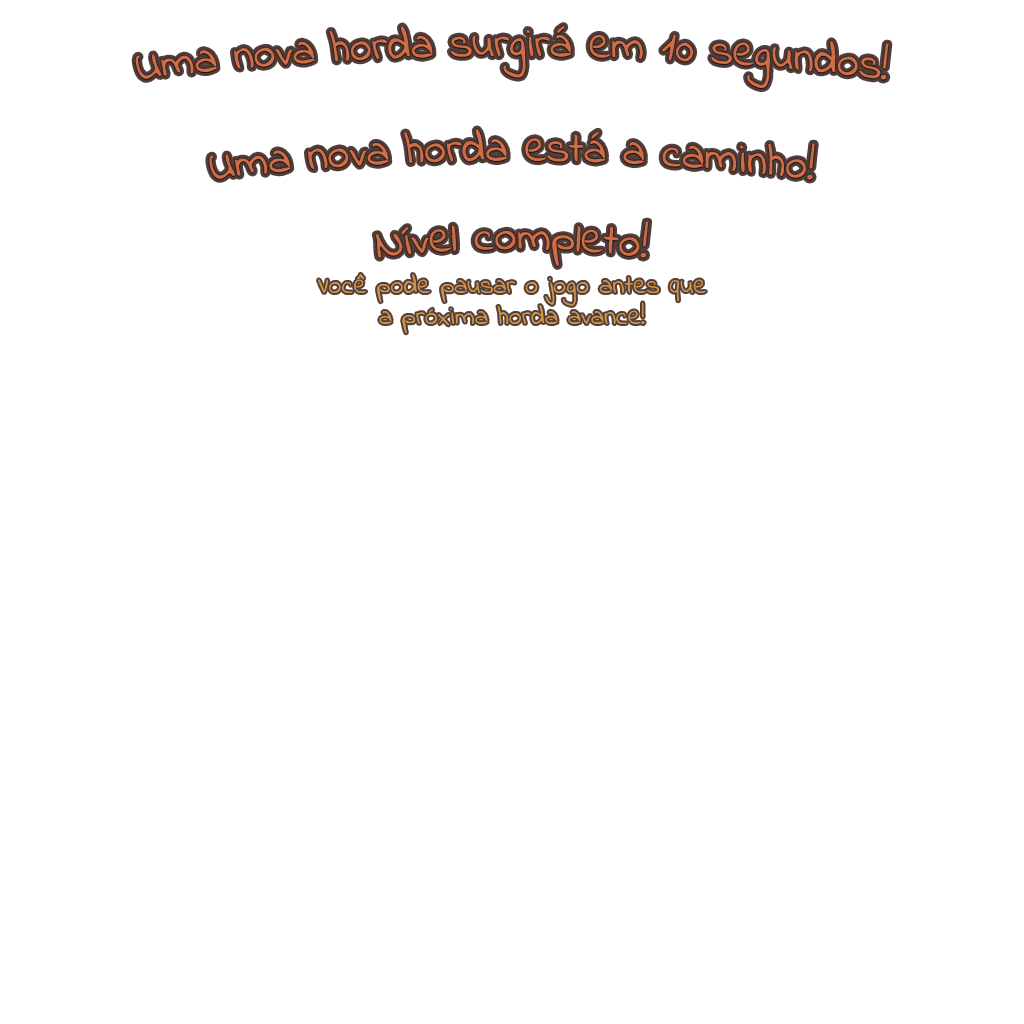
<style>
.page{position:relative;width:1024px;height:1024px;background:#ffffff}
.page>*{position:absolute;margin:0}
.t1{font:43.5px "IndieFlower";color:#d06d46}
.t2{font:26px "IndieFlower";color:#d09446}
</style>
<div class="page">
<p class="t1" style="left:135px;top:26px;width:754px;height:62px">Uma nova horda surgirá em 10 segundos!</p>
<p class="t1" style="left:135px;top:26px;width:754px;height:62px">Uma nova horda surgirá em 10 segundos!</p>
<p class="t1" style="left:209px;top:129px;width:606px;height:51px">Uma nova horda está a caminho!</p>
<p class="t1" style="left:209px;top:129px;width:606px;height:51px">Uma nova horda está a caminho!</p>
<p class="t1" style="left:375px;top:221px;width:274px;height:45px">Nível completo!</p>
<p class="t1" style="left:375px;top:221px;width:274px;height:45px">Nível completo!</p>
<p class="t2" style="left:318px;top:274px;width:388px;height:60px;text-align:center">Você pode pausar o jogo antes que<br>a próxima horda avance!</p>
</div>
